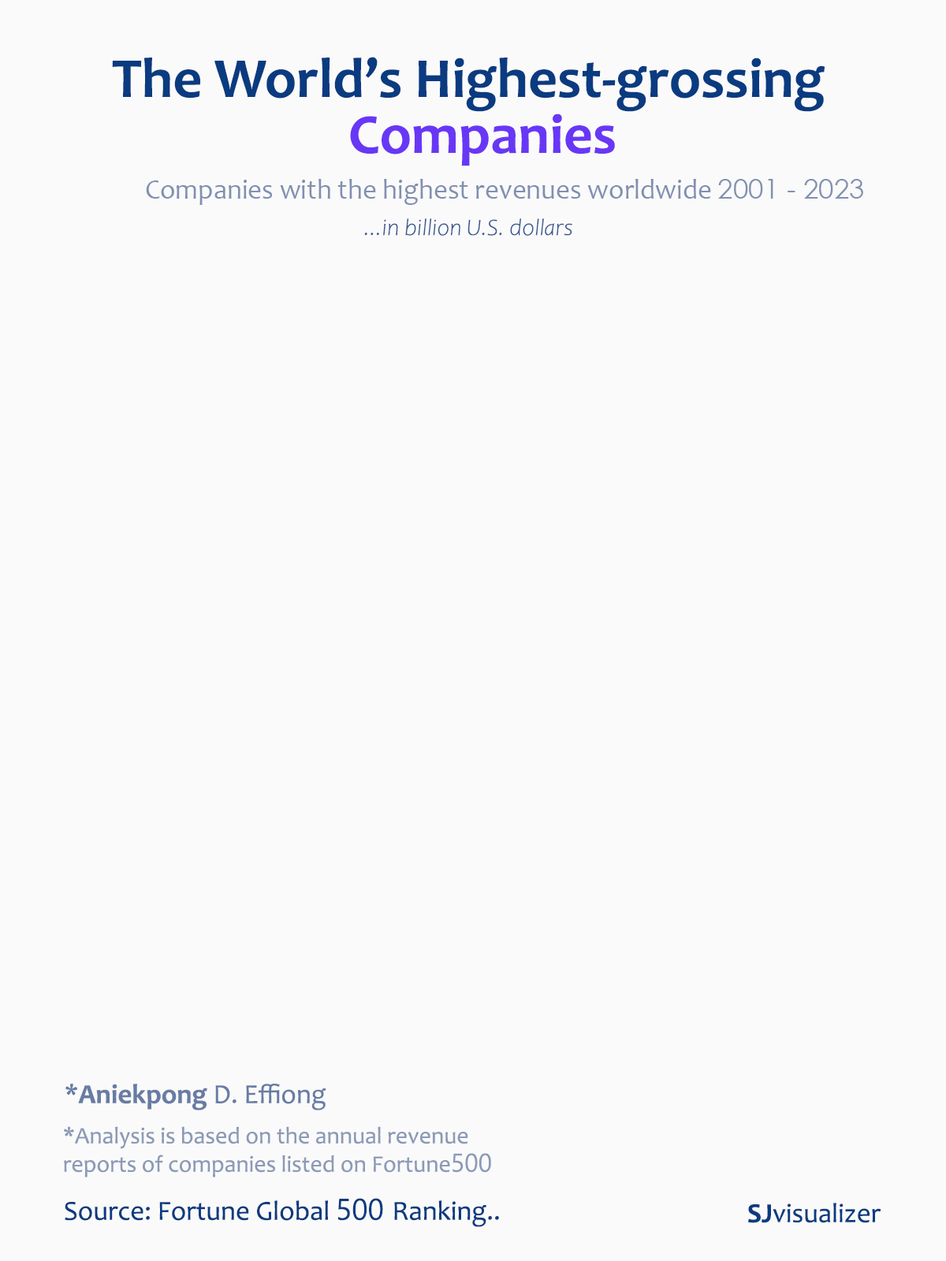
<style>
.page{position:relative;width:946px;height:1261px;background:#fafafa}
.page>*{position:absolute;margin:0}
.t1{font:56.7px "Candara-Bold";color:#0a3b80}
.t2{font:56.7px "Candara-Bold";color:#6837f6}
.t3{font:56.7px "Candara-Bold";color:#000000}
.t4{font:27.6px "Candara";color:#8190b0}
.t5{font:27.6px "CenturyGothic";color:#8190b0}
.t6{font:23.6px "Candara-LightItalic";color:#39578f}
.t7{font:27.6px "Candara";color:#687ca4}
.t8{font:27.6px "Candara-Bold";color:#687ca4}
.t9{font:23.6px "Candara";color:#8c9ab7}
.t10{font:23.6px "MicrosoftJhengHeiUIRegular";color:#8c9ab7}
.t11{font:27.6px "Candara";color:#0a3b80}
.t12{font:27.6px "MicrosoftJhengHeiUIRegular";color:#0a3b80}
.t13{font:27.6px "Candara-Bold";color:#0a3b80}
</style>
<div class="page">
<p class="t1" style="left:112px;top:57px;width:713px;height:55px">The World’s Highest-grossing</p>
<p class="t2" style="left:350px;top:113px;width:265px;height:53px"><span class="t3">          </span>Companies</p>
<p class="t4" style="left:146px;top:179px;width:717px;height:26px">Companies with the highest revenues worldwide <span class="t5">2001 - 2023</span></p>
<p class="t6" style="left:364px;top:218px;width:208px;height:18px">...in billion U.S. dollars</p>
<p class="t7" style="left:65px;top:1084px;width:261px;height:26px">*<span class="t8">Aniekpong</span> D. Effiong</p>
<p class="t9" style="left:64px;top:1126px;width:427px;height:51px">*Analysis is based on the annual revenue<br>reports of companies listed on Fortune<span class="t10">500</span></p>
<p class="t11" style="left:65px;top:1198px;width:434px;height:29px">Source: Fortune Global <span class="t12">500 </span>Ranking..</p>
<p class="t11" style="left:748px;top:1203px;width:133px;height:20px"><span class="t13">SJ</span>visualizer</p>
</div>
